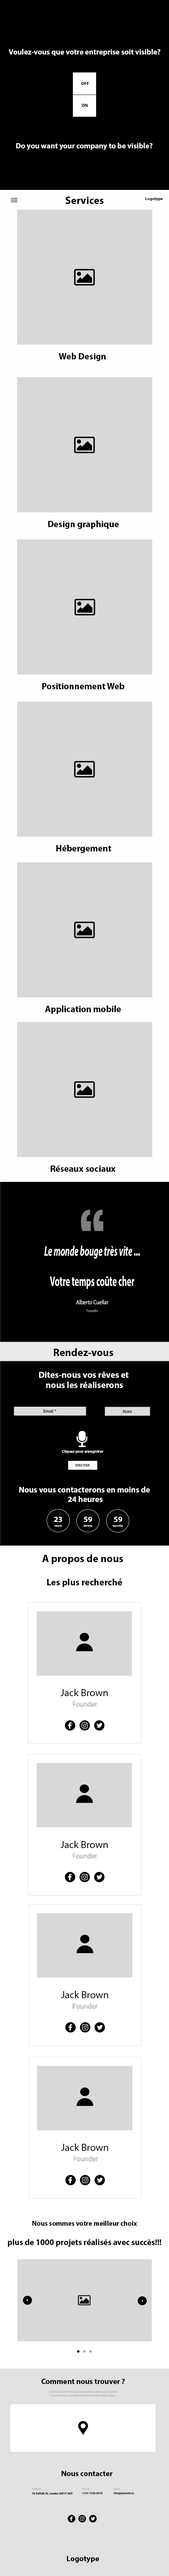
<style>
.page{position:relative;width:169px;height:2576px;background:#d8d8d8}
.page>*{position:absolute;margin:0}
.t1{font:7.6px "MyriadPro-Bold";color:#ffffff}
.t2{font:4.4px "MyriadPro-Bold";color:#000000}
.t3{font:10.6px "MyriadPro-Bold";color:#000000}
.t4{font:4.1px "MyriadPro-Bold";color:#000000}
.t5{font:9px "MyriadPro-Bold";color:#000000}
.t6{font:14px/15.2px "MyriadPro-BoldIt";color:#ffffff;scale:0.59 1}
.t7{font:14px/15.2px "MyriadPro-Bold";color:#ffffff;scale:0.59 1}
.t8{font:6.2px "MyriadPro-Regular";color:#ffffff;scale:0.83 1}
.t9{font:4.1px "MyriadPro-Regular";color:#9c9c9c;scale:0.8 1}
.t10{font:8.9px/10.3px "MyriadPro-Bold";color:#ffffff}
.t11{font:4.4px "MyriadPro-Regular";color:#000000}
.t12{font:3.9px "MyriadPro-Bold";color:#fdfdfd}
.t13{font:3.6px "MyriadPro-Regular";color:#000000}
.t14{font:8.1px/9.4px "MyriadPro-Bold";color:#ffffff}
.t15{font:8.1px "MyriadPro-Bold";color:#ffffff}
.t16{font:2.6px "MyriadPro-Regular";color:#ffffff}
.t17{font:9.3px "MyriadPro-Bold";color:#000000}
.t18{font:10.3px "MyriadPro-Regular";color:#000000}
.t19{font:6.9px "Roboto-Regular";color:#9c9c9c}
.t20{font:8.3px/9.6px "MyriadPro-Bold";color:#000000}
.t21{font:6.9px/9.6px "MyriadPro-Bold";color:#000000}
.t22{font:7.7px "MyriadPro-Bold";color:#000000}
.t23{font:2.5px/3.7px "Roboto-Regular";color:#9c9c9c}
.t24{font:2.5px "Roboto-Regular";color:#9c9c9c}
.t25{font:2.5px "Roboto-Regular"}
.t26{font:2.8px "Roboto-Bold";color:#000000}
</style>
<div class="page">
<p class="t1" style="left:8px;top:49px;width:152px;height:7px">Voulez-vous que votre entreprise soit visible?</p>
<p class="t2" style="left:81px;top:82px;width:8px;height:3px">OFF</p>
<p class="t2" style="left:82px;top:104px;width:6px;height:3px">ON</p>
<p class="t1" style="left:16px;top:143px;width:136px;height:7px">Do you want your company to be visible?</p>
<p class="t3" style="left:65px;top:197px;width:38px;height:7px">Services</p>
<p class="t4" style="left:145px;top:197px;width:17px;height:4px">Logotype</p>
<p class="t5" style="left:59px;top:353px;width:47px;height:8px">Web Design</p>
<p class="t5" style="left:48px;top:520px;width:71px;height:9px">Design graphique</p>
<p class="t5" style="left:42px;top:683px;width:82px;height:6px">Positionnement Web</p>
<p class="t5" style="left:56px;top:845px;width:55px;height:8px">Hébergement</p>
<p class="t5" style="left:45px;top:1005px;width:76px;height:9px">Application mobile</p>
<p class="t5" style="left:51px;top:1165px;width:64px;height:7px">Réseaux sociaux</p>
<p class="t6" style="left:44px;top:1246px;width:96px;height:43px;text-align:center">Le monde bouge très vite ...<br><br><span class="t7">Votre temps coûte cher</span></p>
<p class="t8" style="left:76px;top:1300px;width:32px;height:4px">Alberto Cuellar</p>
<p class="t9" style="left:87px;top:1309px;width:11px;height:3px">Founder</p>
<p class="t3" style="left:54px;top:1348px;width:59px;height:8px">Rendez-vous</p>
<p class="t10" style="left:39px;top:1372px;width:89px;height:16px;text-align:center">Dites-nous vos rêves et <br>nous les réaliserons</p>
<p class="t11" style="left:44px;top:1410px;width:12px;height:3px">Email *</p>
<p class="t11" style="left:123px;top:1410px;width:9px;height:3px">Nom</p>
<p class="t12" style="left:62px;top:1450px;width:41px;height:3px">Cliquez pour enregistrer</p>
<p class="t13" style="left:76px;top:1464px;width:14px;height:2px">ENVOYER</p>
<p class="t14" style="left:19px;top:1487px;width:131px;height:15px;text-align:center">Nous vous contacterons en moins de <br>24 heures</p>
<p class="t15" style="left:54px;top:1517px;width:8px;height:5px">23</p>
<p class="t15" style="left:84px;top:1517px;width:8px;height:5px">59</p>
<p class="t15" style="left:114px;top:1517px;width:8px;height:5px">59</p>
<p class="t16" style="left:54px;top:1525px;width:8px;height:2px">Heures</p>
<p class="t16" style="left:83px;top:1525px;width:9px;height:2px">Minutes</p>
<p class="t16" style="left:112px;top:1524px;width:11px;height:3px">Secondes</p>
<p class="t3" style="left:42px;top:1554px;width:81px;height:10px">A propos de nous</p>
<p class="t17" style="left:47px;top:1579px;width:75px;height:8px">Les plus recherché</p>
<p class="t18" style="left:60px;top:1689px;width:48px;height:7px">Jack Brown</p>
<p class="t19" style="left:73px;top:1701px;width:24px;height:6px">Founder</p>
<p class="t18" style="left:60px;top:1841px;width:48px;height:7px">Jack Brown</p>
<p class="t19" style="left:73px;top:1853px;width:24px;height:6px">Founder</p>
<p class="t18" style="left:61px;top:1991px;width:47px;height:7px">Jack Brown</p>
<p class="t19" style="left:72px;top:2003px;width:25px;height:6px">Founder</p>
<p class="t18" style="left:61px;top:2143px;width:47px;height:8px">Jack Brown</p>
<p class="t19" style="left:73px;top:2156px;width:25px;height:5px">Founder</p>
<p class="t20" style="left:8px;top:2221px;width:153px;height:26px;text-align:center"><span class="t21">Nous sommes votre meilleur choix<br><br></span>plus de 1000 projets réalisés avec succès!!!</p>
<p class="t22" style="left:41px;top:2379px;width:83px;height:5px">Comment nous trouver ?</p>
<p class="t23" style="left:49px;top:2391px;width:68px;height:6px;text-align:center">Lorem ipsum dolor sit amet, consectetur adipiscing elit, sed do eiusmod tempor incididunt ut labore et dolore magna aliqua.</p>
<p class="t22" style="left:62px;top:2471px;width:51px;height:5px">Nous contacter</p>
<p class="t24" style="left:32px;top:2488px;width:9px;height:2px">Address:</p>
<p class="t25" style="left:82px;top:2488px;width:8px;height:2px">Phone:</p>
<p class="t25" style="left:114px;top:2488px;width:6px;height:2px">Email:</p>
<p class="t26" style="left:32px;top:2492px;width:40px;height:3px">18 Suffolk St, London SW1Y 4HT</p>
<p class="t26" style="left:82px;top:2492px;width:20px;height:2px">+123 1234 5678</p>
<p class="t26" style="left:114px;top:2492px;width:20px;height:3px">info@yoursite.io</p>
<p class="t22" style="left:67px;top:2556px;width:32px;height:7px">Logotype</p>
</div>
